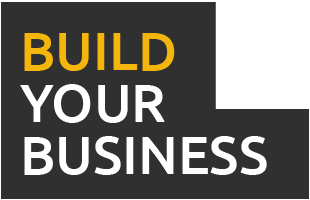
<style>
.page{position:relative;width:310px;height:200px;background:#303030}
.page>*{position:absolute;margin:0}
.t1{font:54px/52px "Ubuntu-Medium";color:#ffffff;text-transform:uppercase}
.t2{font:54px/52px "Ubuntu-Medium";color:#f4b60d;text-transform:uppercase}
</style>
<div class="page">
<p class="t1" style="left:20px;top:33px;width:247px;height:142px"><span class="t2">Build<br></span>your<br>business</p>
</div>
